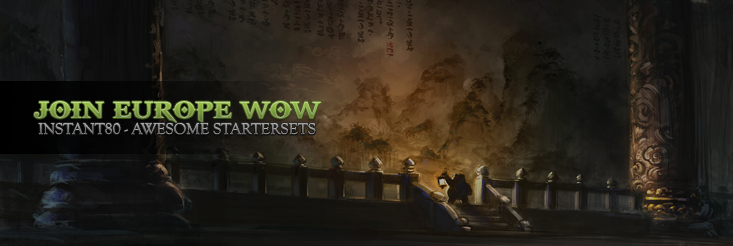
<style>
.page{position:relative;width:733px;height:246px}
.page>*{position:absolute;margin:0}
.t1{font:26px "GodOfWar"}
.t2{font:16px "GoudyOldStyleT-Regular"}
</style>
<div class="page">
<p class="t1" style="left:34px;top:101px;width:287px;height:23px">JOIN EUROPE WOW</p>
<p class="t2" style="left:38px;top:122px;width:278px;height:13px">INSTANT80 - AWESOME STARTERSETS</p>
</div>
